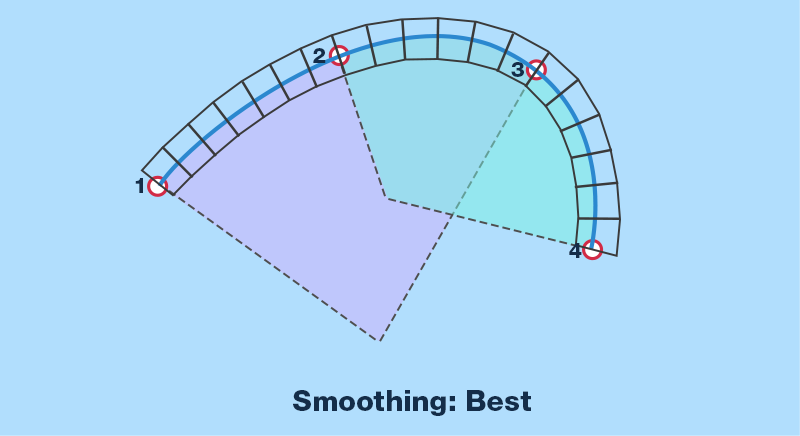
<style>
.page{position:relative;width:800px;height:436px;background:#b1defd}
.page>*{position:absolute;margin:0}
.t1{font:21.6px "HelveticaNeueCyr-Heavy";color:#142d49}
.t2{font:28.8px "HelveticaNeueCyr-Heavy";color:#142d49}
</style>
<div class="page">
<p class="t1" style="left:313px;top:48px;width:13px;height:15px">2</p>
<p class="t1" style="left:511px;top:62px;width:13px;height:15px">3</p>
<p class="t1" style="left:135px;top:178px;width:8px;height:15px">1</p>
<p class="t1" style="left:569px;top:243px;width:13px;height:15px">4</p>
<p class="t2" style="left:293px;top:390px;width:238px;height:26px">Smoothing: Best</p>
</div>
